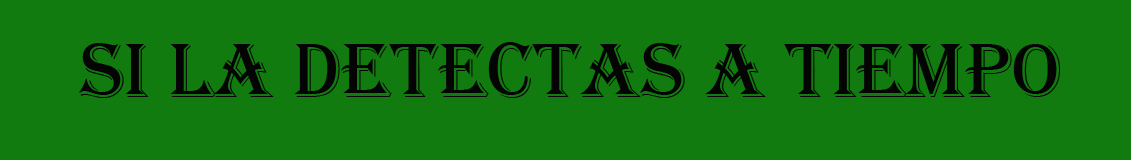
<style>
.page{position:relative;width:1131px;height:160px;background:#127b0f}
.page>*{position:absolute;margin:0}
.t1{font:80px "Algerian";color:#040404}
</style>
<div class="page">
<p class="t1" style="left:79px;top:42px;width:981px;height:56px">SI LA DETECTAS A TIEMPO</p>
</div>
